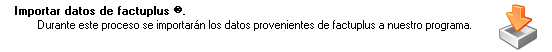
<style>
.page{position:relative;width:552px;height:52px;background:#ffffff}
.page>*{position:absolute;margin:0}
.t1{font:11.4px "MS Sans Serif";color:#000000;font-weight:bold}
.t2{font:11.4px "MS Sans Serif";color:#000000}
</style>
<div class="page">
<p class="t1" style="left:15px;top:6px;width:170px;height:11px">Importar datos de factuplus ®.</p>
<p class="t2" style="left:38px;top:20px;width:433px;height:11px">Durante este proceso se importarán los datos provenientes de factuplus a nuestro programa.</p>
</div>
